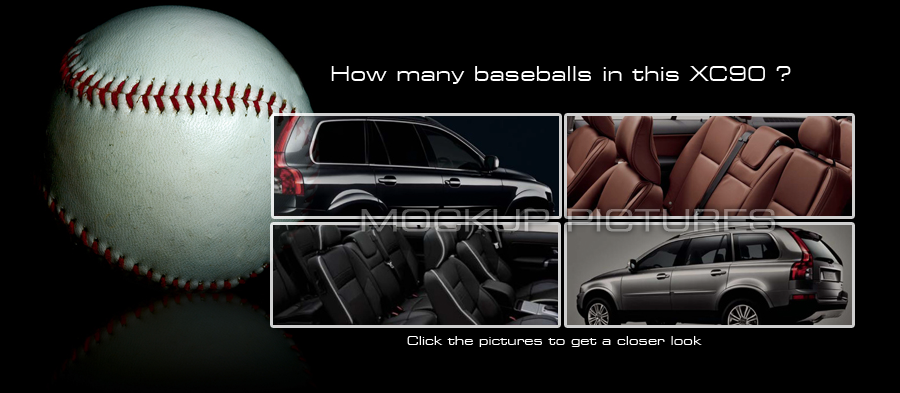
<style>
.page{position:relative;width:900px;height:393px;background:#000000}
.page>*{position:absolute;margin:0}
.t1{font:20px "Square721BT-RomanExtended";color:#ffffff}
.t2{font:12px "Square721BT-RomanExtended";color:#ffffff}
</style>
<div class="page">
<p class="t1" style="left:331px;top:66px;width:460px;height:18px">How many baseballs in this XC90 ?</p>
<p class="t2" style="left:407px;top:336px;width:295px;height:11px">Click the pictures to get a closer look</p>
</div>
